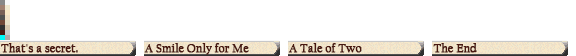
<style>
.page{position:relative;width:576px;height:56px;background:#ffffff}
.page>*{position:absolute;margin:0}
.t1{font:12px "CalifornianFB-Reg";color:#481810;font-weight:bold}
.t2{font:12px "CalifornianFB-Reg";letter-spacing:-0.005em;color:#481810;font-weight:bold}
.t3{font:9.6px "CalifornianFB-Reg";letter-spacing:-0.005em;color:#481810;font-weight:bold;scale:1.25 1}
</style>
<div class="page">
<p class="t1" style="left:1px;top:43px;width:77px;height:10px">That's a secret.</p>
<p class="t2" style="left:144px;top:43px;width:105px;height:12px">A Smile Onl<span class="t3">y</span> for Me</p>
<p class="t1" style="left:288px;top:43px;width:74px;height:10px">A Tale of Two</p>
<p class="t1" style="left:433px;top:43px;width:44px;height:10px">The End</p>
</div>
